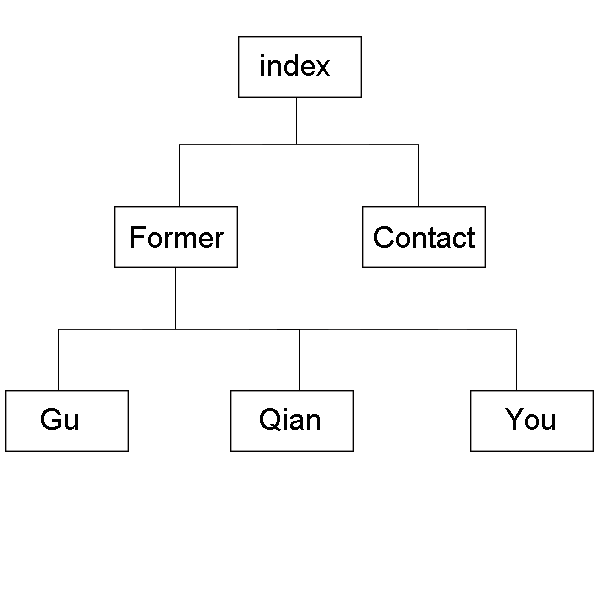
<style>
.page{position:relative;width:600px;height:600px;background:#ffffff}
.page>*{position:absolute;margin:0}
.t1{font:30px "ArialMT";color:#020202}
</style>
<div class="page">
<p class="t1" style="left:261px;top:54px;width:69px;height:22px">index</p>
<p class="t1" style="left:131px;top:226px;width:93px;height:22px">Former</p>
<p class="t1" style="left:374px;top:226px;width:101px;height:22px">Contact</p>
<p class="t1" style="left:41px;top:408px;width:37px;height:22px">Gu</p>
<p class="t1" style="left:260px;top:408px;width:60px;height:23px">Qian</p>
<p class="t1" style="left:505px;top:408px;width:50px;height:22px">You</p>
</div>
